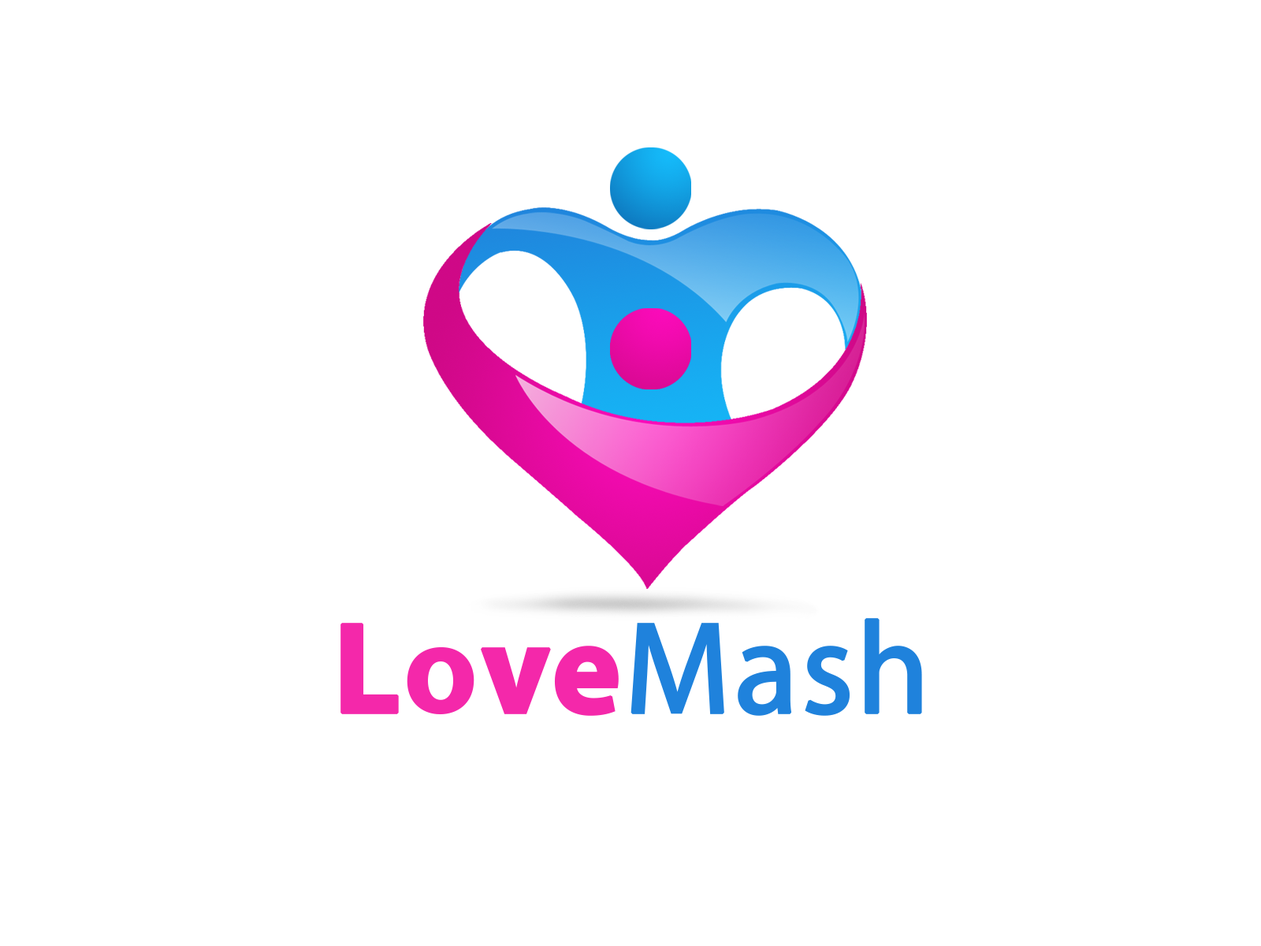
<style>
.page{position:relative;width:1261px;height:946px;background:#ffffff}
.page>*{position:absolute;margin:0}
.t1{font:131.2px "MyriadPro-Bold";color:#f428aa;font-weight:bold}
.t2{font:131.2px "MyriadPro-Regular";color:#1f82dc;font-weight:bold}
</style>
<div class="page">
<p class="t1" style="left:340px;top:618px;width:582px;height:98px">Love<span class="t2">Mash</span></p>
</div>
